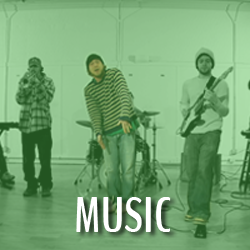
<style>
.page{position:relative;width:250px;height:250px}
.page>*{position:absolute;margin:0}
.t1{font:50px "BenchNine-Bold";letter-spacing:0.005em;color:#ffffff}
</style>
<div class="page">
<p class="t1" style="left:76px;top:197px;width:95px;height:35px">MUSIC</p>
</div>
